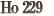
<style>
.page{position:relative;width:54px;height:16px;background:#ffffff}
.page>*{position:absolute;margin:0}
.t1{font:16px "RyuminPro-ExBold";letter-spacing:-0.08em;color:#4a3f32;font-weight:bold;scale:0.9 1}
</style>
<div class="page">
<p class="t1" style="left:0px;top:1px;width:43px;height:13px">Ho 229</p>
</div>
